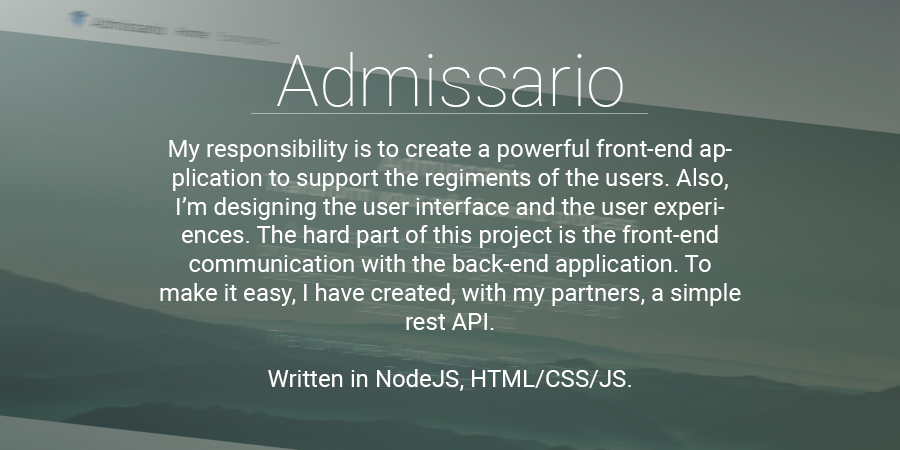
<style>
.page{position:relative;width:900px;height:450px}
.page>*{position:absolute;margin:0}
.t1{font:72px "Roboto-Thin";color:#ffffff}
.t2{font:24px "Roboto-Regular";color:#ffffff}
</style>
<div class="page">
<p class="t1" style="left:277px;top:52px;width:346px;height:55px">Admissario</p>
<p class="t2" style="left:160px;top:139px;width:581px;height:252px;text-align:center">My responsibility is to create a powerful front-end application to support the regiments of the users. Also, I’m designing the user interface and the user experiences. The hard part of this project is the front-end communication with the back-end application. To make it easy, I have created, with my partners, a simple rest API. <br><br>Written in NodeJS, HTML/CSS/JS.</p>
</div>
